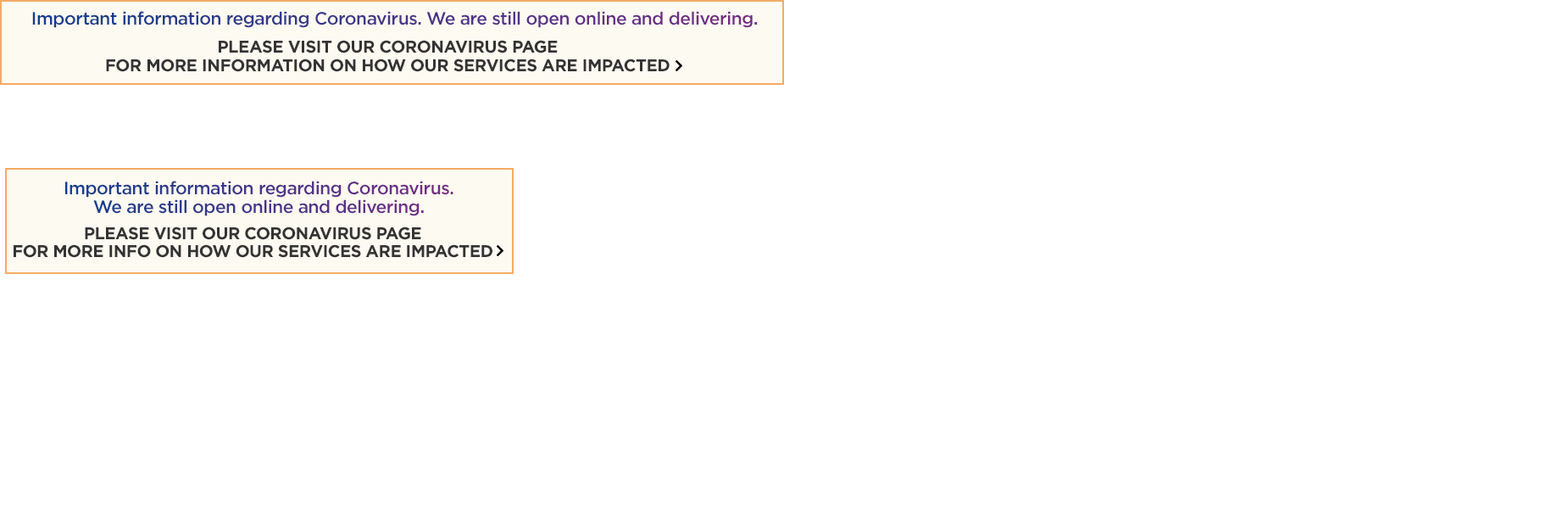
<style>
.page{position:relative;width:1568px;height:509px;background:#ffffff}
.page>*{position:absolute;margin:0}
.t1{font:17.8px "Gotham-Medium";letter-spacing:-0.025em}
.t2{font:17px/18.6px "Gotham-Bold";letter-spacing:-0.025em;color:#333333;text-transform:uppercase}
.t3{font:17px/27.1px "Gotham-Bold";letter-spacing:-0.025em;color:#333333;text-transform:uppercase}
.t4{font:17.8px/18.6px "Gotham-Medium";letter-spacing:-0.025em}
.t5{font:17px/17.7px "Gotham-Bold";letter-spacing:-0.03em;color:#333333;text-transform:uppercase}
.t6{font:17px/25.8px "Gotham-Bold";letter-spacing:-0.03em;color:#333333;text-transform:uppercase}
</style>
<div class="page">
<p class="t1" style="left:32px;top:11px;width:725px;height:17px">Important information regarding Coronavirus. We are still open online and delivering.</p>
<p class="t2" style="left:106px;top:40px;width:564px;height:32px;text-align:center"><span class="t3">please visit our Coronavirus page <br></span>for more infoRMATION on how our services are impacted</p>
<p class="t4" style="left:65px;top:181px;width:388px;height:35px;text-align:center">Important information regarding Coronavirus. <br>We are still open online and delivering.</p>
<p class="t5" style="left:14px;top:226px;width:478px;height:32px;text-align:center"><span class="t6">please visit our Coronavirus page <br></span>for more info on how our services are impacted</p>
</div>
